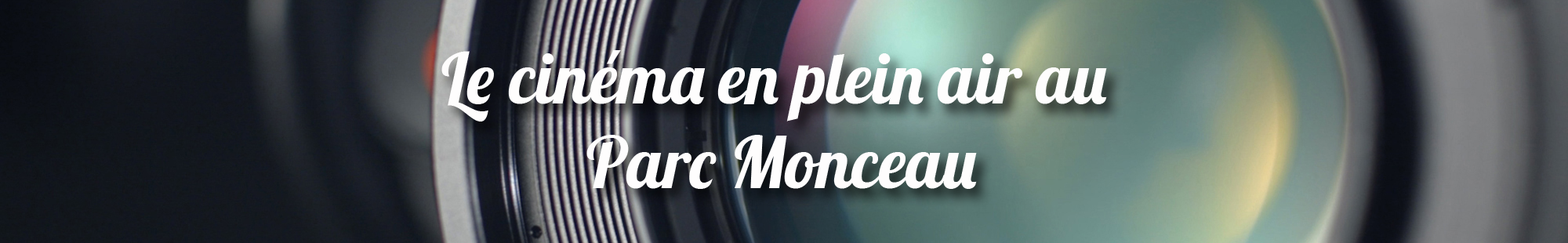
<style>
.page{position:relative;width:1568px;height:243px}
.page>*{position:absolute;margin:0}
.t1{font:70.6px "Lobster-Regular";color:#fefdfd}
</style>
<div class="page">
<p class="t1" style="left:441px;top:50px;width:666px;height:139px;text-align:center">Le cinéma en plein air au <br>Parc Monceau</p>
</div>
